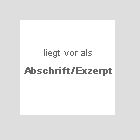
<style>
.page{position:relative;width:140px;height:140px;background:#dedede}
.page>*{position:absolute;margin:0}
.t1{font:9px/18px "ArialMT";color:#666666;font-weight:bold}
.t2{font:9px/18px "ArialMT";color:#666666}
</style>
<div class="page">
<p class="t1" style="left:24px;top:49px;width:88px;height:27px;text-align:center"><span class="t2">liegt vor als<br></span>Abschrift/Exzerpt</p>
</div>
